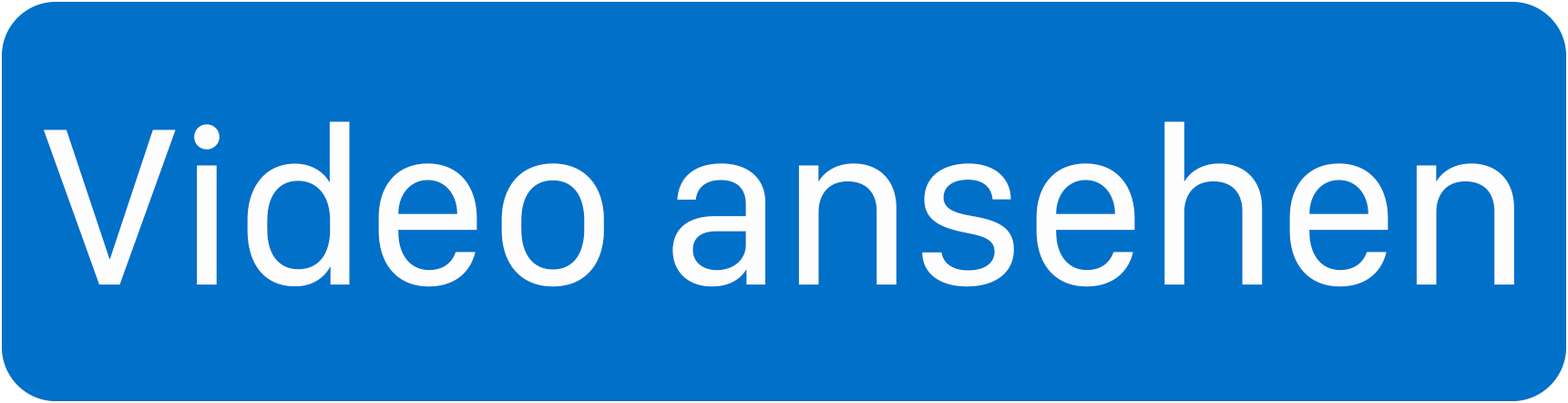
<style>
.page{position:relative;width:1568px;height:403px;background:#0070c9}
.page>*{position:absolute;margin:0}
.t1{font:231.6px "SFCompactDisplay-Regular";color:#fdfdfd}
</style>
<div class="page">
<p class="t1" style="left:44px;top:121px;width:1470px;height:166px">Video ansehen</p>
</div>
